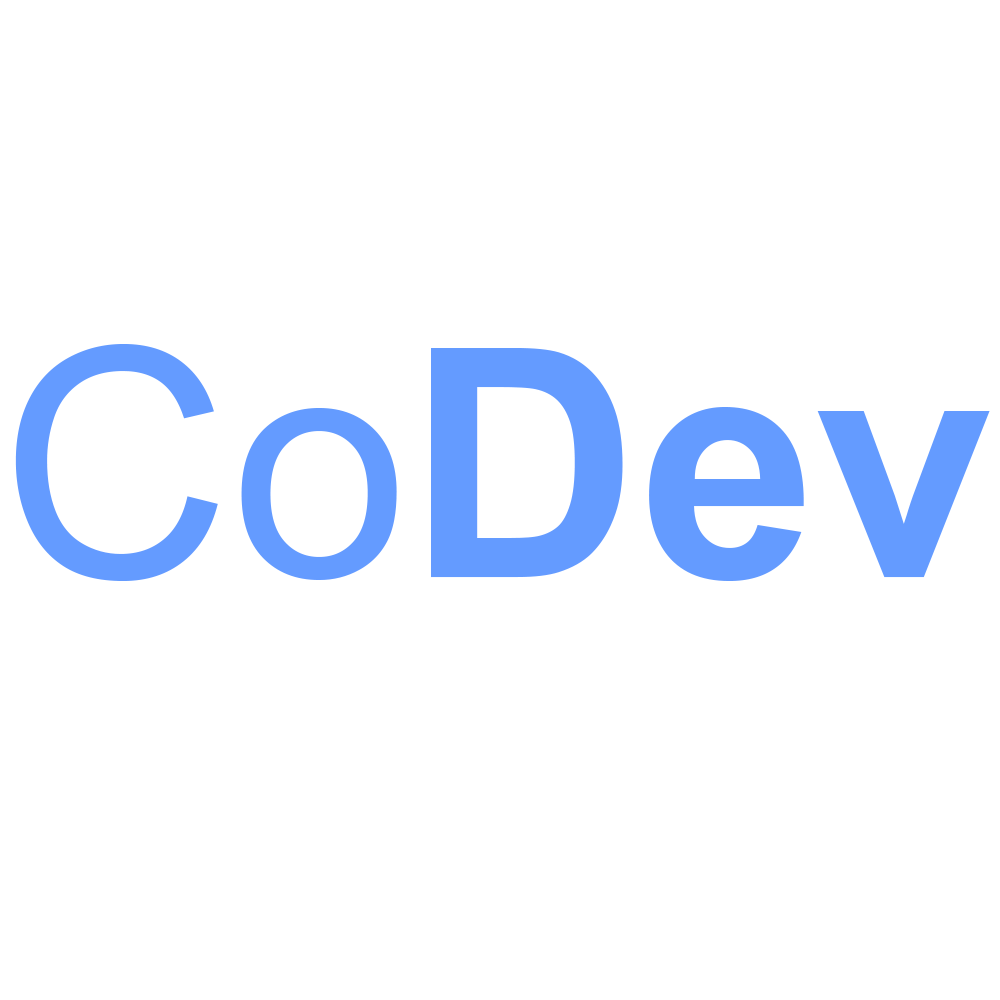
<style>
.page{position:relative;width:1000px;height:1000px;background:#ffffff}
.page>*{position:absolute;margin:0}
.t1{font:319.2px "Arial-BoldMT";color:#649bff}
.t2{font:319.2px "ArialMT";color:#649bff}
</style>
<div class="page">
<p class="t1" style="left:15px;top:344px;width:975px;height:237px"><span class="t2">Co</span>Dev</p>
</div>
